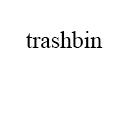
<style>
.page{position:relative;width:128px;height:128px;background:#ffffff}
.page>*{position:absolute;margin:0}
.t1{font:23.7px "TimesNewRomanPSMT";color:#000000}
</style>
<div class="page">
<p class="t1" style="left:25px;top:31px;width:78px;height:17px">trashbin</p>
</div>
